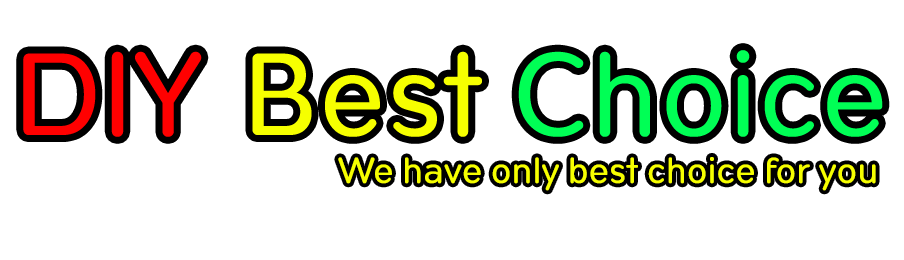
<style>
.page{position:relative;width:904px;height:260px;background:#ffffff}
.page>*{position:absolute;margin:0}
.t1{font:104.2px "Opun-Regular";color:#ff0000;font-weight:bold}
.t2{font:104.2px "Opun-Regular";color:#00ff55;font-weight:bold}
.t3{font:104.2px "Opun-Regular";color:#f6ff00;font-weight:bold}
.t4{font:31.4px "Opun-Regular";color:#f6ff00;font-weight:bold}
</style>
<div class="page">
<p class="t1" style="left:23px;top:51px;width:179px;height:86px">DIY</p>
<p class="t2" style="left:252px;top:50px;width:631px;height:87px"><span class="t3">Best </span>Choice</p>
<p class="t4" style="left:338px;top:157px;width:538px;height:34px">We have only best choice for you</p>
</div>
